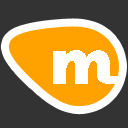
<style>
.page{position:relative;width:128px;height:128px;background:#333333}
.page>*{position:absolute;margin:0}
.t1{font:83px "Deliscript";color:#ffffff}
</style>
<div class="page">
<p class="t1" style="left:53px;top:50px;width:67px;height:34px">m</p>
</div>
